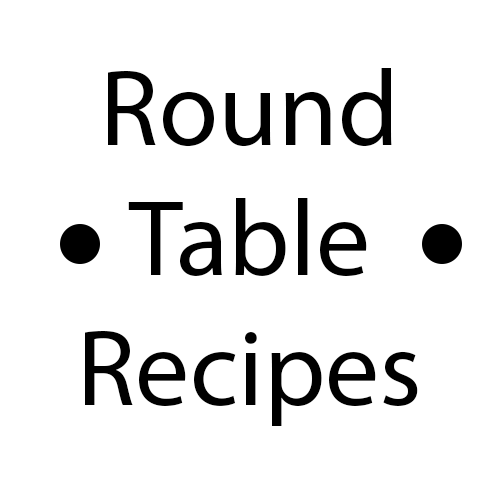
<style>
.page{position:relative;width:500px;height:500px;background:#ffffff}
.page>*{position:absolute;margin:0}
.t1{font:108.3px "MyriadPro-Regular";color:#000000}
</style>
<div class="page">
<p class="t1" style="left:85px;top:68px;width:333px;height:358px;text-align:center">Round<br>Table<br>Recipes</p>
</div>
